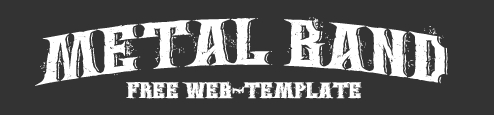
<style>
.page{position:relative;width:494px;height:115px;background:#333333}
.page>*{position:absolute;margin:0}
.t1{font:66px "WingsofDarkness";color:#ffffff;text-transform:uppercase}
.t2{font:22px "WingsofDarkness";color:#ffffff;text-transform:uppercase}
</style>
<div class="page">
<p class="t1" style="left:35px;top:17px;width:413px;height:69px">Metal Band</p>
<p class="t2" style="left:126px;top:81px;width:236px;height:18px">Free Web-Template</p>
</div>
